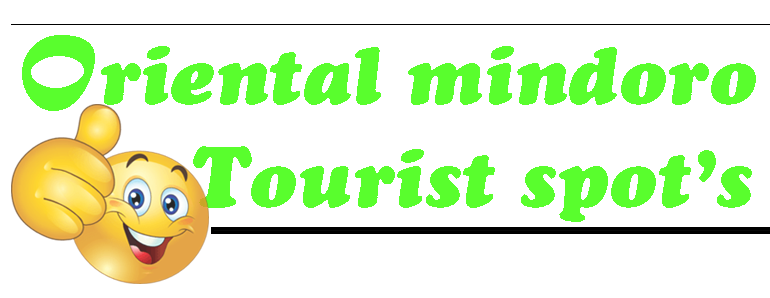
<style>
.page{position:relative;width:770px;height:298px;background:#ffffff}
.page>*{position:absolute;margin:0}
.t1{font:80px "CooperBlackStd-Italic";color:#59fe2d}
.t2{font:94px "Ravie";color:#59fe2d}
.t3{font:86px "CooperBlackStd-Italic";color:#59fe2d}
</style>
<div class="page">
<p class="t1" style="left:22px;top:35px;width:734px;height:187px;text-align:center"><span class="t2">O</span>riental mindoro<br>       <span class="t3">T</span>ourist spot’s</p>
</div>
